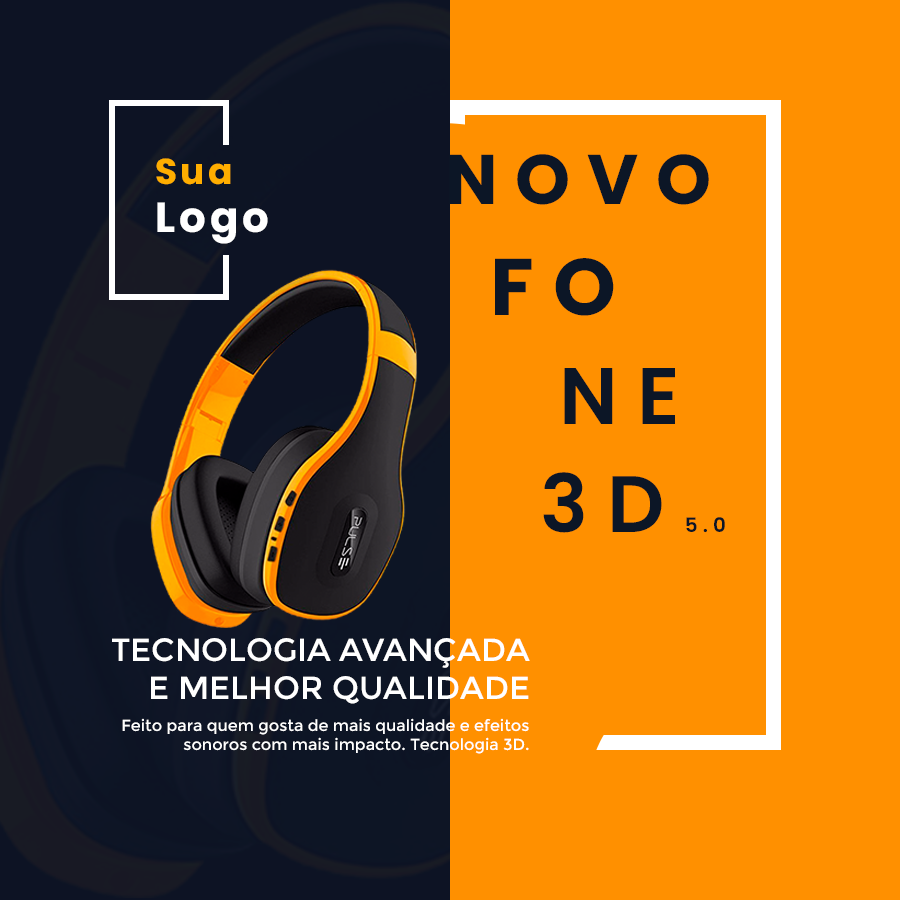
<style>
.page{position:relative;width:900px;height:900px;background:#ff9000}
.page>*{position:absolute;margin:0}
.t1{font:42px/48px "Poppins-Bold";letter-spacing:0.1em;color:#ffffff}
.t2{font:36px/48px "Poppins-Bold";letter-spacing:0.1em;color:#ffae00}
.t3{font:70px "Poppins-Bold";letter-spacing:0.25em;color:#0c1626;text-transform:uppercase}
.t4{font:80px "Poppins-Bold";letter-spacing:0.25em;color:#0c1626;text-transform:uppercase}
.t5{font:80px "Poppins-SemiBold";letter-spacing:0.25em;color:#0c1626;text-transform:uppercase}
.t6{font:20px "Poppins-SemiBold";letter-spacing:0.25em;color:#0c1626;text-transform:uppercase}
.t7{font:32px "Montserrat-Regular";color:#ffffff;text-transform:uppercase}
.t8{font:16px "Montserrat-Regular";color:#ffffff}
</style>
<div class="page">
<p class="t1" style="left:156px;top:158px;width:112px;height:86px"><span class="t2">Sua<br></span>Logo</p>
<p class="t3" style="left:449px;top:154px;width:260px;height:51px">novo</p>
<p class="t4" style="left:495px;top:258px;width:119px;height:58px">fon</p>
<p class="t5" style="left:564px;top:368px;width:111px;height:56px">ne</p>
<p class="t6" style="left:543px;top:472px;width:182px;height:61px"><span class="t5">3d</span>5.0</p>
<p class="t7" style="left:112px;top:638px;width:418px;height:66px;text-align:right">tecnologia avançada<br>e melhor qualidade</p>
<p class="t8" style="left:122px;top:718px;width:407px;height:36px;text-align:right">Feito para quem gosta de mais qualidade e efeitos sonoros com mais impacto. Tecnologia 3D.</p>
</div>
